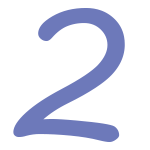
<style>
.page{position:relative;width:150px;height:150px;background:#ffffff}
.page>*{position:absolute;margin:0}
.t1{font:181.3px "MVBoli";color:#6d79ba}
</style>
<div class="page">
<p class="t1" style="left:13px;top:8px;width:112px;height:134px">2</p>
</div>
